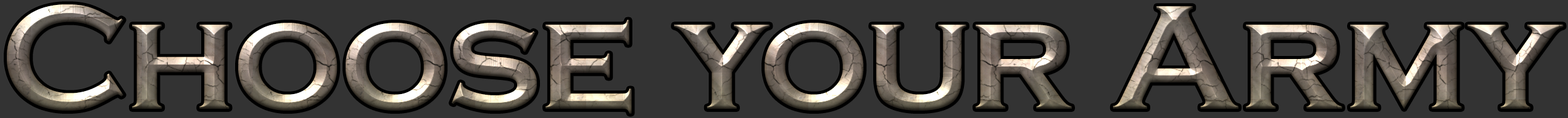
<style>
.page{position:relative;width:1568px;height:118px;background:#333333}
.page>*{position:absolute;margin:0}
.t1{font:154.3px "CopperplateGothic-Bold"}
</style>
<div class="page">
<p class="t1" style="left:7px;top:4px;width:1557px;height:110px">Choose your Army</p>
</div>
